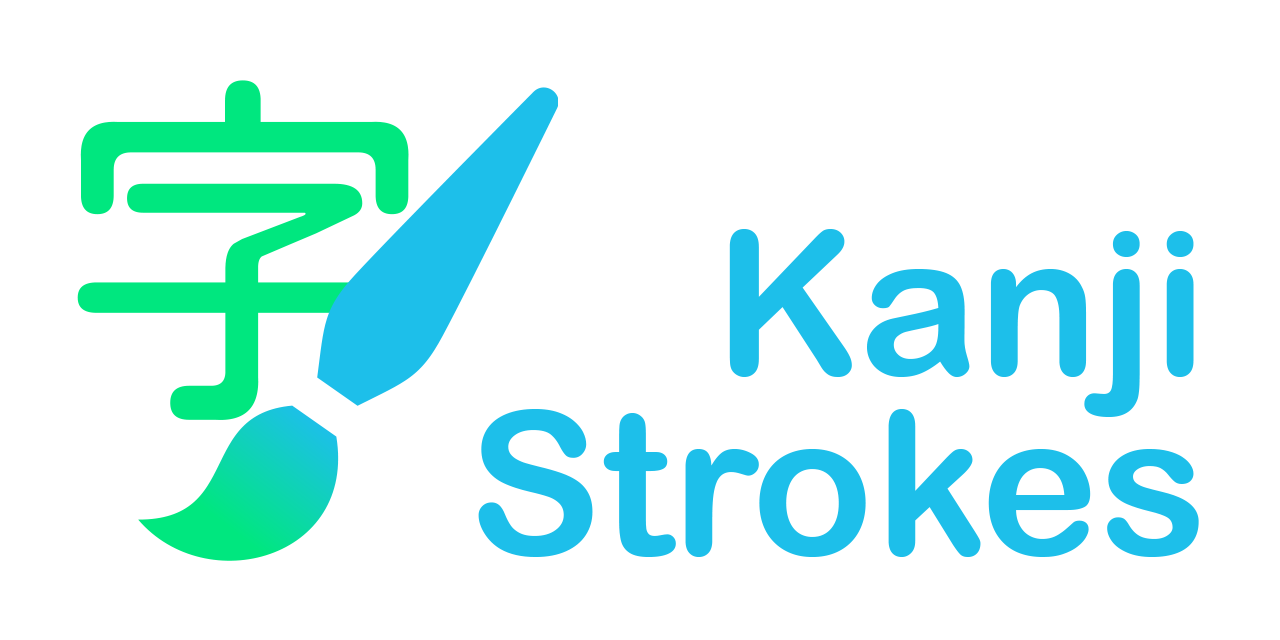
<style>
.page{position:relative;width:1280px;height:640px;background:#ffffff}
.page>*{position:absolute;margin:0}
.t1{font:200px/180px "ArialRoundedMTBold";color:#1dbfea}
</style>
<div class="page">
<p class="t1" style="left:478px;top:229px;width:721px;height:328px;text-align:right">Kanji<br>Strokes</p>
</div>
